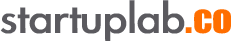
<style>
.page{position:relative;width:231px;height:41px;background:#ffffff}
.page>*{position:absolute;margin:0}
.t1{font:48px "LiGothicMed";color:#5b5a5f;scale:1.1 1}
.t2{font:36px "Impact";color:#ff6e00;scale:1.1 1}
</style>
<div class="page">
<p class="t1" style="left:0px;top:0px;width:231px;height:41px">startuplab<span class="t2">.co</span></p>
</div>
